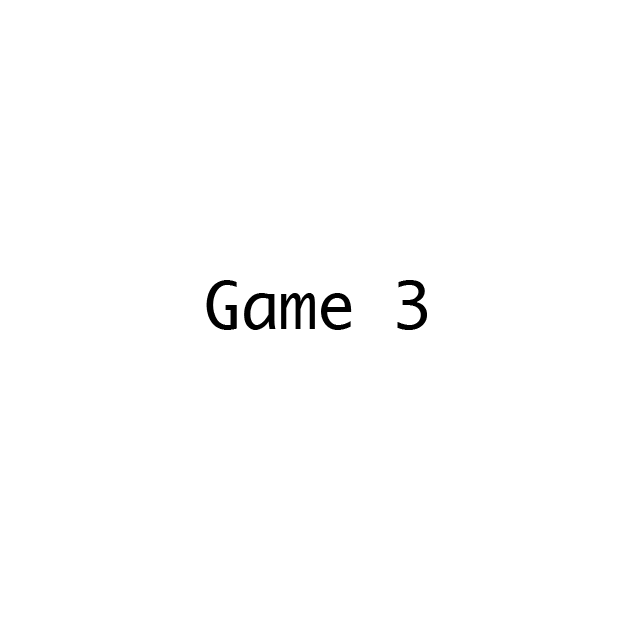
<style>
.page{position:relative;width:640px;height:640px;background:#ffffff}
.page>*{position:absolute;margin:0}
.t1{font:63.5px "Monaco";color:#000000}
</style>
<div class="page">
<p class="t1" style="left:206px;top:280px;width:221px;height:50px">Game 3</p>
</div>
